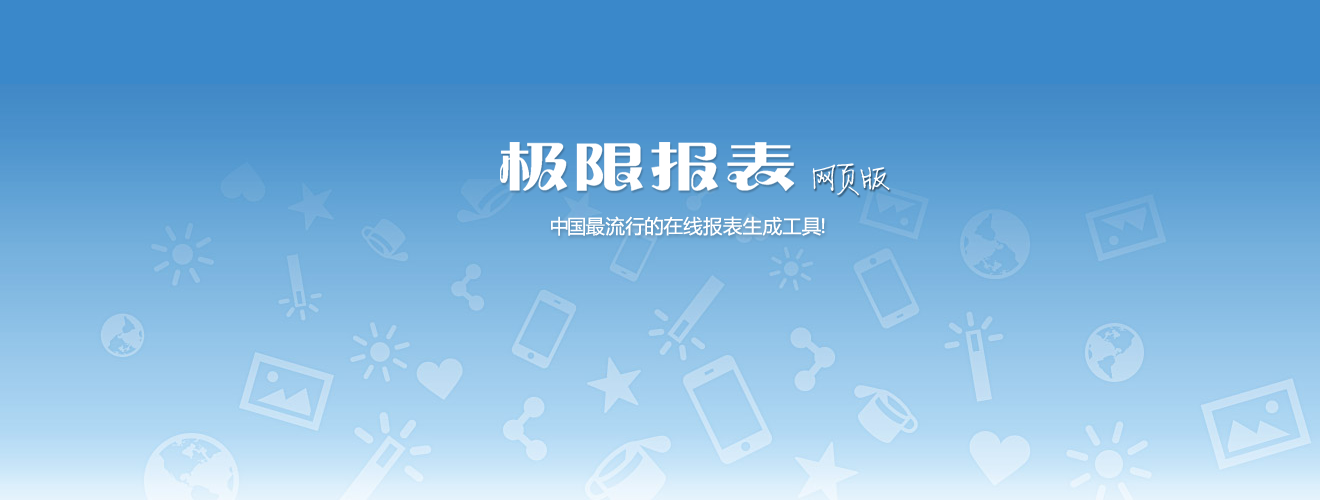
<style>
.page{position:relative;width:1320px;height:500px}
.page>*{position:absolute;margin:0}
.t1{font:36px "FZJLJW--GB1-0";letter-spacing:0.05em;color:#ffffff}
.t2{font:19.4px "MicrosoftYaHei";letter-spacing:0.05em;color:#ffffff}
</style>
<div class="page">
<p class="t1" style="left:812px;top:163px;width:78px;height:33px">网页版</p>
<p class="t2" style="left:551px;top:216px;width:274px;height:20px">中国最流行的在线报表生成工具!</p>
</div>
